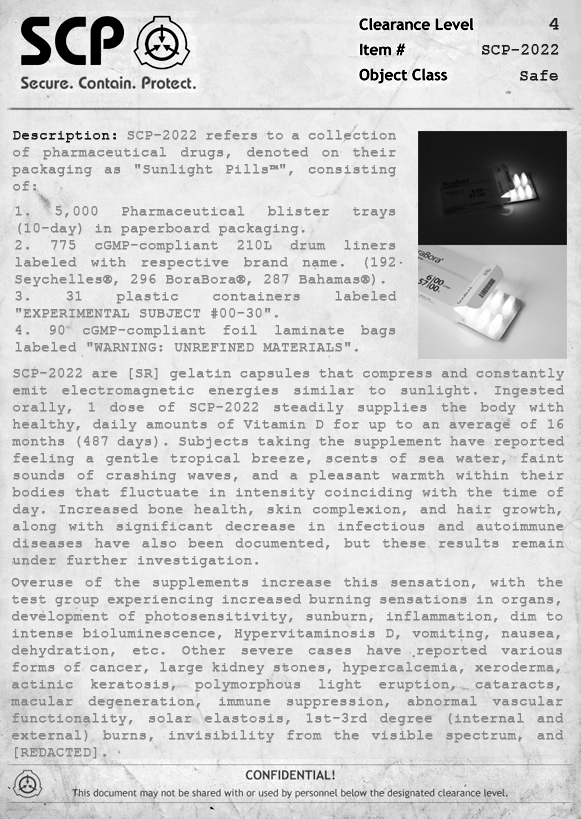
<style>
.page{position:relative;width:581px;height:819px}
.page>*{position:absolute;margin:0}
.t1{font:18.1px "CourierNewPSMT";color:#1b1b1b;font-weight:bold;scale:1.21 1}
.t2{font:15.7px "CourierNewPSMT";color:#1b1b1b;font-weight:bold}
.t3{font:14.2px "CourierNewPSMT";color:#858585;font-weight:bold}
.t4{font:14.2px "CourierNewPSMT";color:#181818;font-weight:bold}
</style>
<div class="page">
<p class="t1" style="left:549px;top:18px;width:10px;height:12px">4</p>
<p class="t2" style="left:482px;top:44px;width:77px;height:11px">SCP-2022</p>
<p class="t2" style="left:520px;top:70px;width:38px;height:11px">Safe</p>
<p class="t3" style="left:12px;top:130px;width:384px;height:61px;text-align:justify"><span class="t4">Description: </span>SCP-2022 refers to a collection of pharmaceutical drugs, denoted on their packaging as "Sunlight Pills™", consisting of:</p>
<p class="t3" style="left:15px;top:206px;width:382px;height:146px;text-align:justify">1. 5,000 Pharmaceutical blister trays (10-day) in paperboard packaging.<br>2. 775 cGMP-compliant 210L drum liners labeled with respective brand name. (192 Seychelles®, 296 BoraBora®, 287 Bahamas®).<br>3. 31 plastic containers labeled "EXPERIMENTAL SUBJECT #00-30".<br>4. 90 cGMP-compliant foil laminate bags labeled "WARNING: UNREFINED MATERIALS".</p>
<p class="t3" style="left:12px;top:368px;width:552px;height:200px;text-align:justify">SCP-2022 are [SR] gelatin capsules that compress and constantly emit electromagnetic energies similar to sunlight. Ingested orally, 1 dose of SCP-2022 steadily supplies the body with healthy, daily amounts of Vitamin D for up to an average of 16 months (487 days). Subjects taking the supplement have reported feeling a gentle tropical breeze, scents of sea water, faint sounds of crashing waves, and a pleasant warmth within their bodies that fluctuate in intensity coinciding with the time of day. Increased bone health, skin complexion, and hair growth, along with significant decrease in infectious and autoimmune diseases have also been documented, but these results remain under further investigation.</p>
<p class="t3" style="left:11px;top:577px;width:553px;height:182px;text-align:justify">Overuse of the supplements increase this sensation, with the test group experiencing increased burning sensations in organs, development of photosensitivity, sunburn, inflammation, dim to intense bioluminescence, Hypervitaminosis D, vomiting, nausea, dehydration, etc. Other severe cases have reported various forms of cancer, large kidney stones, hypercalcemia, xeroderma, actinic keratosis, polymorphous light eruption, cataracts, macular degeneration, immune suppression, abnormal vascular functionality, solar elastosis, 1st-3rd degree (internal and external) burns, invisibility from the visible spectrum, and [REDACTED].</p>
</div>
